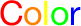
<style>
.page{position:relative;width:81px;height:26px;background:#ffffff}
.page>*{position:absolute;margin:0}
.t1{font:34px "HelveticaNeue";color:#ff0000}
.t2{font:34px "HelveticaNeue";color:#ff7f00}
.t3{font:34px "HelveticaNeue";color:#ffff00}
.t4{font:34px "HelveticaNeue";color:#00ff00}
.t5{font:34px "HelveticaNeue";color:#0000ff}
</style>
<div class="page">
<p class="t1" style="left:0px;top:0px;width:81px;height:26px">C<span class="t2">o</span><span class="t3">l</span><span class="t4">o</span><span class="t5">r</span></p>
</div>
